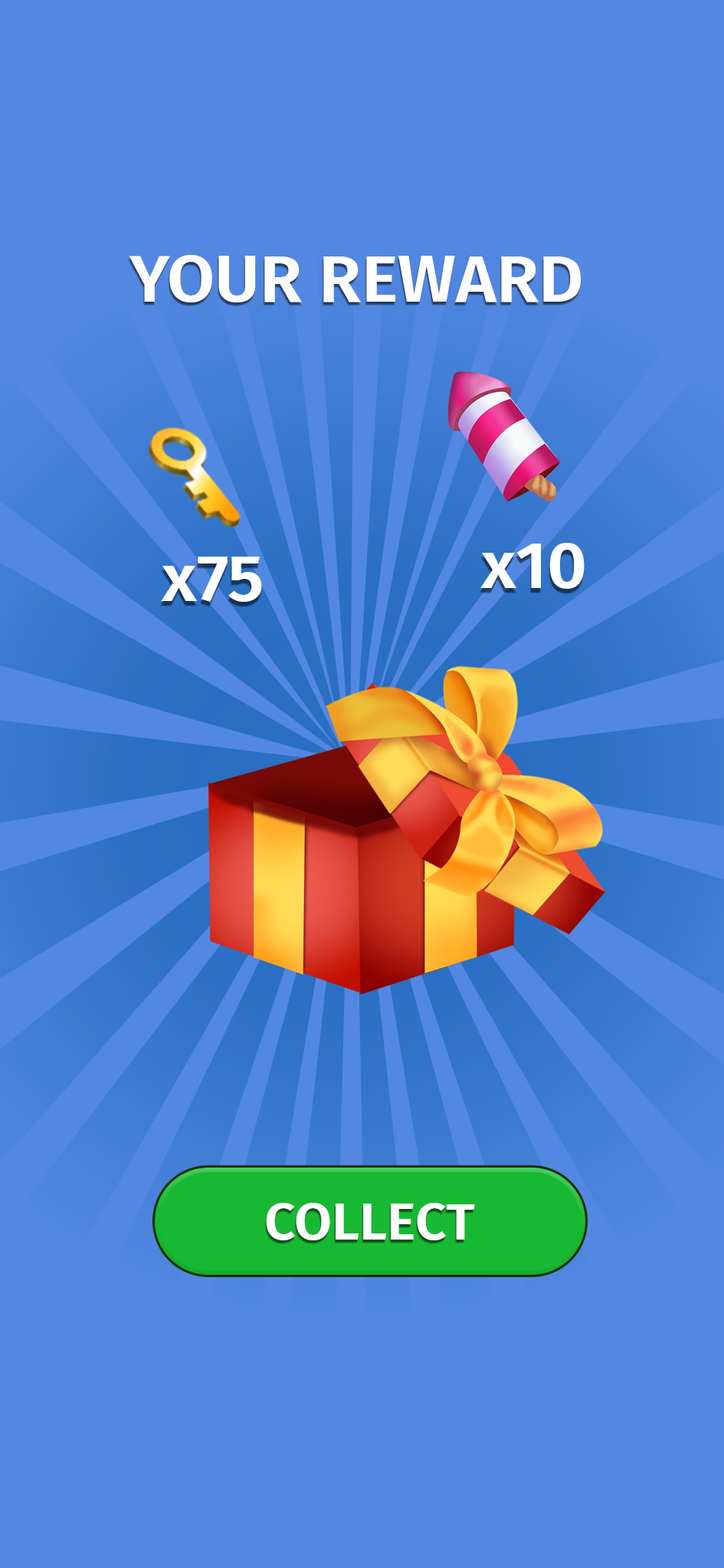
<style>
.page{position:relative;width:724px;height:1568px;background:#5288e2}
.page>*{position:absolute;margin:0}
.t1{font:65.5px "FiraSans-SemiBold";color:#ffffff;scale:1.05 1}
.t2{font:51.6px "FiraSans-SemiBold";color:#ffffff;scale:1.05 1}
</style>
<div class="page">
<p class="t1" style="left:129px;top:255px;width:451px;height:47px">YOUR REWARD</p>
<p class="t1" style="left:480px;top:543px;width:104px;height:46px">x10</p>
<p class="t1" style="left:161px;top:557px;width:101px;height:45px">x75</p>
<p class="t2" style="left:266px;top:1203px;width:209px;height:37px">COLLECT</p>
</div>
